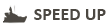
<style>
.page{position:relative;width:108px;height:27px;background:#ffffff}
.page>*{position:absolute;margin:0}
.t1{font:18px "Calibri-Bold";color:#4b4741}
</style>
<div class="page">
<p class="t1" style="left:34px;top:9px;width:72px;height:11px">SPEED UP</p>
</div>
